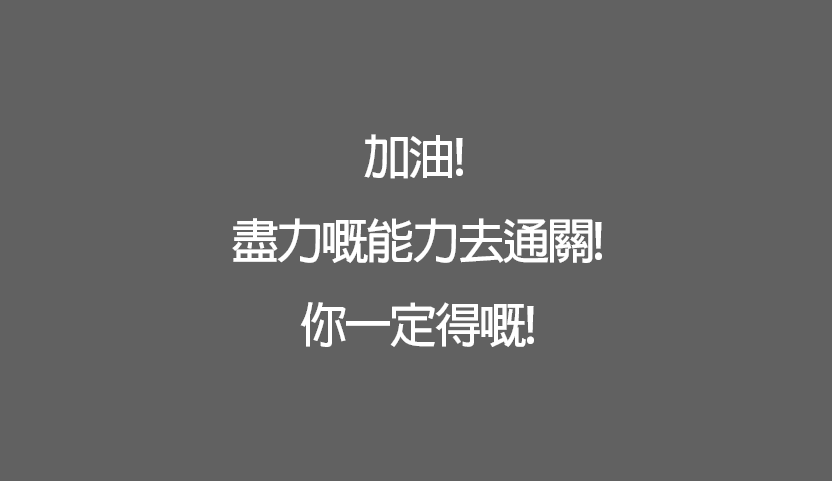
<style>
.page{position:relative;width:832px;height:481px;background:#616161}
.page>*{position:absolute;margin:0}
.t1{font:48px "AdobeFanHeitiStd-Bold";letter-spacing:-0.06em;color:#ffffff}
</style>
<div class="page">
<p class="t1" style="left:232px;top:134px;width:370px;height:213px;text-align:center">加油! <br>盡力嘅能力去通關!<br>你一定得嘅!</p>
</div>
